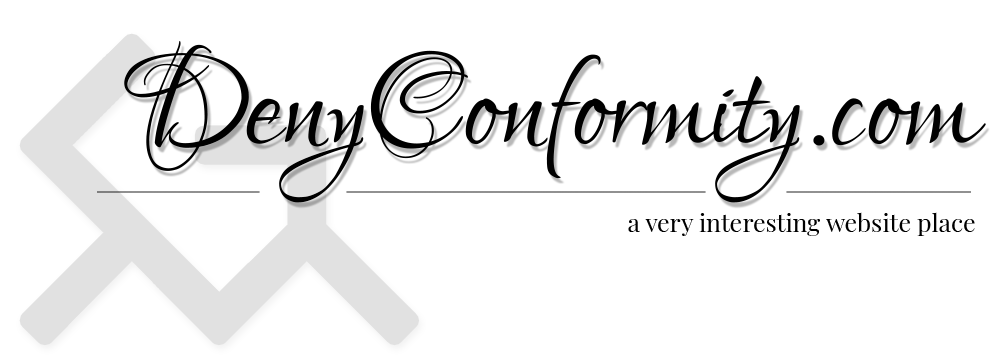
<style>
.page{position:relative;width:1000px;height:364px;background:#ffffff}
.page>*{position:absolute;margin:0}
.t1{font:170.5px "LoversQuarrel-Regular";color:#000000}
.t2{font:24.8px "PlayfairDisplay-Regular";color:#000000}
</style>
<div class="page">
<p class="t1" style="left:124px;top:40px;width:862px;height:163px">DenyConformity.com</p>
<p class="t2" style="left:628px;top:212px;width:347px;height:24px">a very interesting website place</p>
</div>
